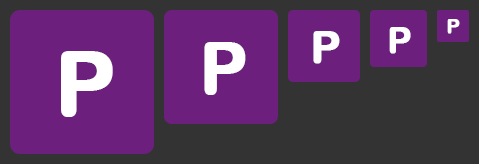
<style>
.page{position:relative;width:479px;height:164px;background:#6c1f7d}
.page>*{position:absolute;margin:0}
.t1{font:35.6px "ArialRoundedMTBold";letter-spacing:-0.04em;color:#ffffff;font-weight:bold}
.t2{font:20px "ArialRoundedMTBold";letter-spacing:-0.04em;color:#ffffff;font-weight:bold}
.t3{font:45px "ArialRoundedMTBold";letter-spacing:-0.04em;color:#ffffff;font-weight:bold}
.t4{font:90px "ArialRoundedMTBold";letter-spacing:-0.04em;color:#ffffff;font-weight:bold}
.t5{font:71.2px "ArialRoundedMTBold";letter-spacing:-0.04em;color:#ffffff;font-weight:bold}
</style>
<div class="page">
<p class="t1" style="left:389px;top:27px;width:22px;height:27px">P</p>
<p class="t2" style="left:447px;top:19px;width:13px;height:15px">P</p>
<p class="t3" style="left:313px;top:31px;width:27px;height:33px">P</p>
<p class="t4" style="left:61px;top:51px;width:52px;height:66px">P</p>
<p class="t5" style="left:204px;top:42px;width:42px;height:53px">P</p>
</div>
